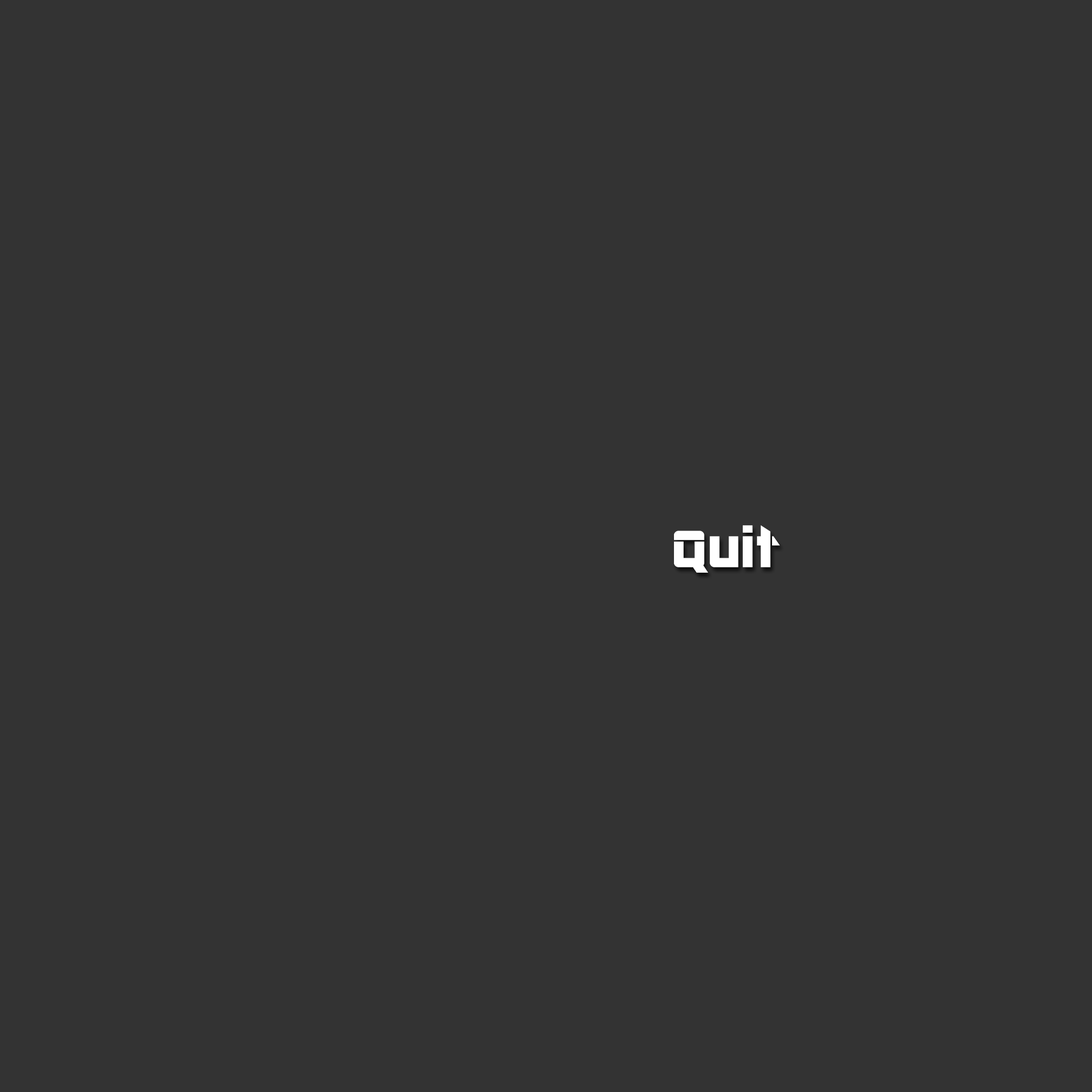
<style>
.page{position:relative;width:1092px;height:1092px;background:#333333}
.page>*{position:absolute;margin:0}
.t1{font:57.6px "ARDESTINE";color:#ffffff;scale:1.04 1}
</style>
<div class="page">
<p class="t1" style="left:674px;top:525px;width:106px;height:48px">Quit</p>
</div>
